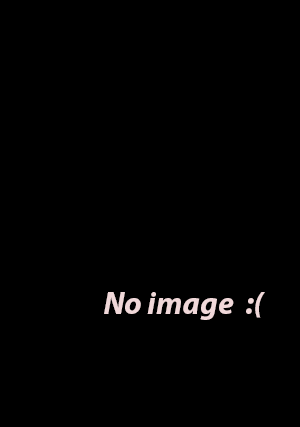
<style>
.page{position:relative;width:300px;height:427px;background:#000000}
.page>*{position:absolute;margin:0}
.t1{font:31.7px "MyriadPro-BoldIt";color:#f0d8d9}
</style>
<div class="page">
<p class="t1" style="left:104px;top:292px;width:161px;height:28px">No image  :(</p>
</div>
